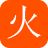
<style>
.page{position:relative;width:48px;height:48px;background:#ff5000}
.page>*{position:absolute;margin:0}
.t1{font:36px "SimSun";color:#ffffff}
</style>
<div class="page">
<p class="t1" style="left:7px;top:5px;width:34px;height:34px">火v</p>
</div>
